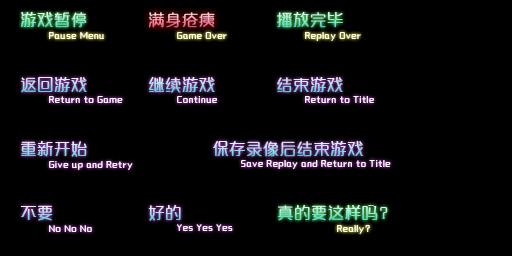
<style>
.page{position:relative;width:512px;height:256px;background:#000000}
.page>*{position:absolute;margin:0}
.t1{font:14.7px "MFYaYuan_Noncommercial-Regular";letter-spacing:0.15em}
.t2{font:8px "MFYaYuan_Noncommercial-Regular";letter-spacing:0.15em;color:#ffffff}
</style>
<div class="page">
<p class="t1" style="left:21px;top:12px;width:66px;height:16px">游戏暂停</p>
<p class="t1" style="left:148px;top:12px;width:67px;height:16px">满身疮痍</p>
<p class="t1" style="left:277px;top:12px;width:66px;height:16px">播放完毕</p>
<p class="t2" style="left:49px;top:32px;width:55px;height:7px">Pause Menu</p>
<p class="t2" style="left:177px;top:32px;width:50px;height:7px">Game Over</p>
<p class="t2" style="left:305px;top:32px;width:56px;height:9px">Replay Over</p>
<p class="t1" style="left:21px;top:77px;width:66px;height:16px">返回游戏</p>
<p class="t1" style="left:149px;top:77px;width:66px;height:16px">继续游戏</p>
<p class="t1" style="left:277px;top:77px;width:66px;height:16px">结束游戏</p>
<p class="t2" style="left:49px;top:96px;width:74px;height:7px">Return to Game</p>
<p class="t2" style="left:177px;top:96px;width:40px;height:7px">Continue</p>
<p class="t2" style="left:305px;top:96px;width:69px;height:7px">Return to Title</p>
<p class="t1" style="left:21px;top:141px;width:66px;height:16px">重新开始</p>
<p class="t1" style="left:213px;top:141px;width:151px;height:16px">保存录像后结束游戏</p>
<p class="t2" style="left:49px;top:161px;width:84px;height:9px">Give up and Retry</p>
<p class="t2" style="left:241px;top:160px;width:150px;height:9px">Save Replay and Return to Title</p>
<p class="t1" style="left:21px;top:205px;width:32px;height:16px">不要</p>
<p class="t1" style="left:148px;top:205px;width:33px;height:16px">好的</p>
<p class="t1" style="left:277px;top:205px;width:111px;height:16px">真的要这样吗？</p>
<p class="t2" style="left:49px;top:225px;width:43px;height:7px">No No No</p>
<p class="t2" style="left:177px;top:224px;width:56px;height:7px">Yes Yes Yes</p>
<p class="t2" style="left:337px;top:225px;width:33px;height:9px">Really？</p>
</div>
